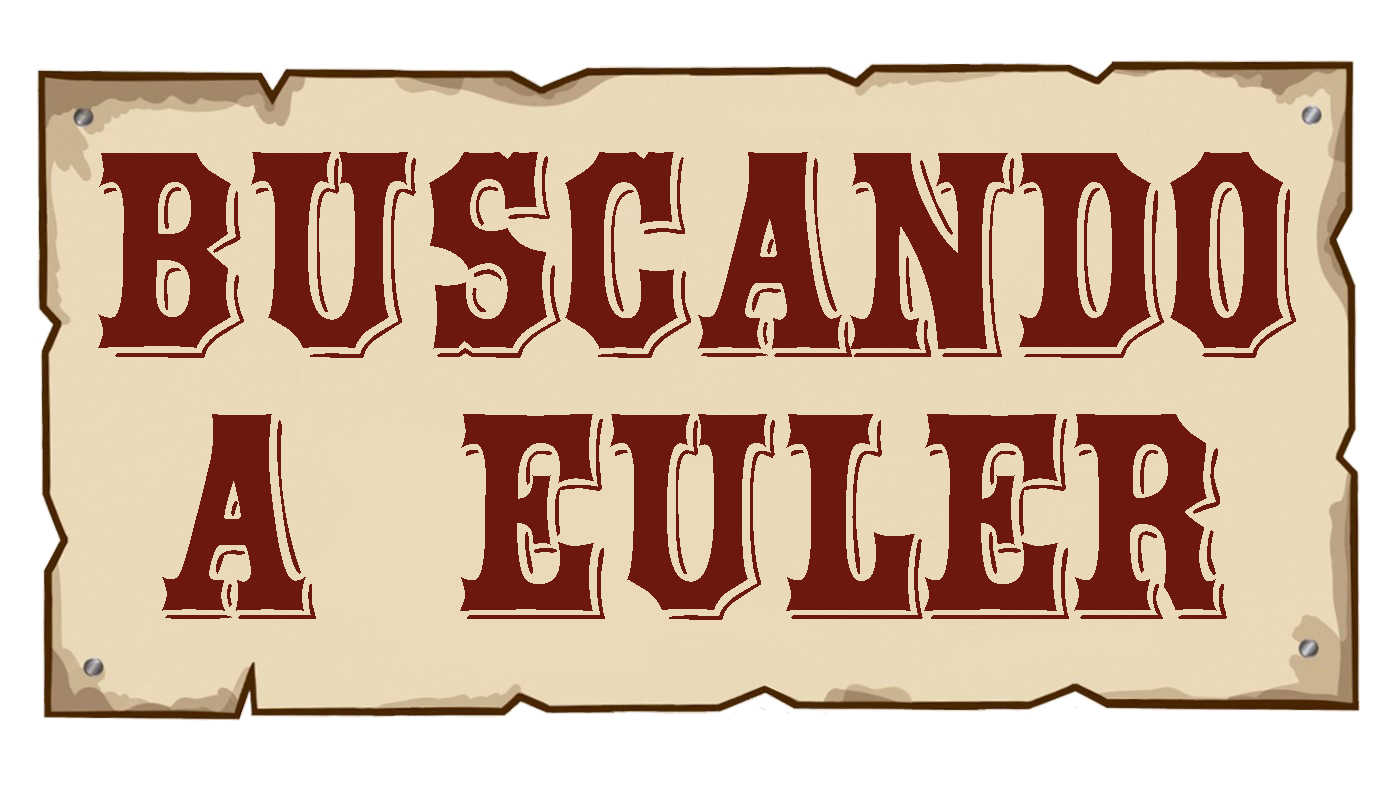
<style>
.page{position:relative;width:1387px;height:791px;background:#eadab9}
.page>*{position:absolute;margin:0}
.t1{font:293.3px "Montague";color:#6c180e}
</style>
<div class="page">
<p class="t1" style="left:98px;top:152px;width:1198px;height:206px">buscando</p>
<p class="t1" style="left:162px;top:414px;width:1065px;height:206px">a euler</p>
</div>
